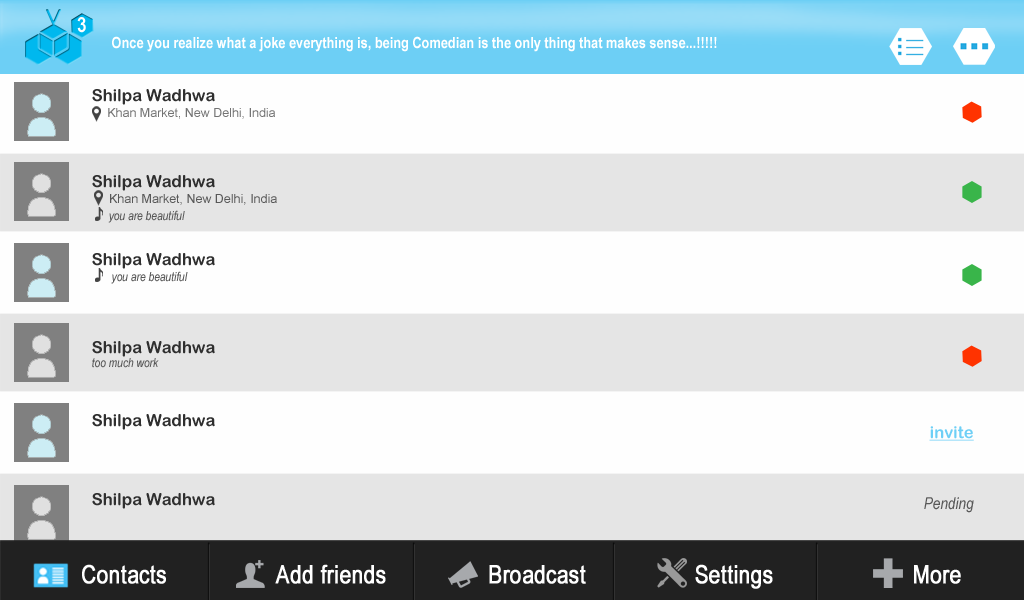
<style>
.page{position:relative;width:1024px;height:600px;background:#e5e5e5}
.page>*{position:absolute;margin:0}
.t1{font:20.8px "ArialNarrow-Bold";color:#ffffff}
.t2{font:15.6px "ArialNarrow-Bold";color:#ffffff}
.t3{font:12.5px/16.6px "ArialMT";color:#737373}
.t4{font:16.6px/13.9px "ArialRoundedMTBold";color:#2f2f2f}
.t5{font:12.5px/16.6px "ArialMT";color:#585858}
.t6{font:12.5px/16.6px "ArialNarrow-Italic";color:#585858}
.t7{font:12.5px/13.9px "ArialNarrow-Italic";color:#585858}
.t8{font:16.6px "ArialRoundedMTBold";color:#2f2f2f}
.t9{font:16.6px "ArialRoundedMTBold";color:#6dcff6;text-decoration:underline}
.t10{font:16.6px "ArialNarrow-Italic";color:#585858}
.t11{font:24.9px "ArialNarrow";color:#ffffff;font-weight:bold}
</style>
<div class="page">
<p class="t1" style="left:77px;top:17px;width:9px;height:16px">3</p>
<p class="t2" style="left:112px;top:36px;width:605px;height:16px">Once you realize what a joke everything is, being Comedian is the only thing that makes sense...!!!!!</p>
<p class="t3" style="left:92px;top:89px;width:183px;height:30px"><span class="t4">Shilpa Wadhwa <br>    </span> Khan Market, New Delhi, India</p>
<p class="t5" style="left:92px;top:175px;width:185px;height:48px"><span class="t4">Shilpa Wadhwa <br>     </span>Khan Market, New Delhi, India<br><span class="t6">      you are beautiful</span></p>
<p class="t6" style="left:92px;top:253px;width:123px;height:31px"><span class="t4">Shilpa Wadhwa<br></span>       you are beautiful</p>
<p class="t4" style="left:92px;top:341px;width:123px;height:27px">Shilpa Wadhwa <br><span class="t7">too much work</span></p>
<p class="t8" style="left:92px;top:414px;width:123px;height:16px">Shilpa Wadhwa</p>
<p class="t9" style="left:929px;top:426px;width:45px;height:15px">invite</p>
<p class="t8" style="left:92px;top:493px;width:123px;height:16px">Shilpa Wadhwa</p>
<p class="t10" style="left:924px;top:497px;width:50px;height:16px">Pending</p>
<p class="t11" style="left:82px;top:564px;width:84px;height:20px">Contacts</p>
<p class="t11" style="left:275px;top:564px;width:111px;height:20px">Add friends</p>
<p class="t11" style="left:489px;top:565px;width:97px;height:19px">Broadcast</p>
<p class="t11" style="left:695px;top:564px;width:78px;height:25px">Settings</p>
<p class="t11" style="left:914px;top:565px;width:47px;height:19px">More</p>
</div>
